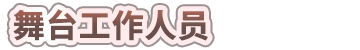
<style>
.page{position:relative;width:360px;height:50px;background:#ffffff}
.page>*{position:absolute;margin:0}
.t1{font:32px "SourceHanSansSC-Bold";font-weight:bold}
</style>
<div class="page">
<p class="t1" style="left:13px;top:9px;width:195px;height:32px">舞台工作人员</p>
</div>
